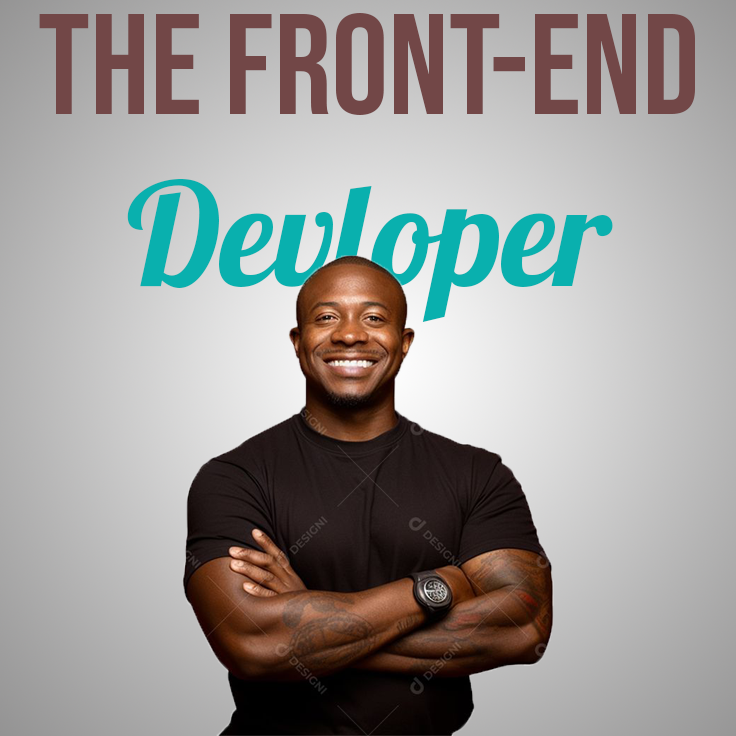
<style>
.page{position:relative;width:736px;height:736px}
.page>*{position:absolute;margin:0}
.t1{font:142.7px "BebasNeue-Regular";color:#724747}
.t2{font:142.7px "Lobster1.4";color:#09b0ae}
</style>
<div class="page">
<p class="t1" style="left:39px;top:13px;width:656px;height:309px;text-align:center">The Front-End<br><span class="t2">Devloper</span></p>
</div>
